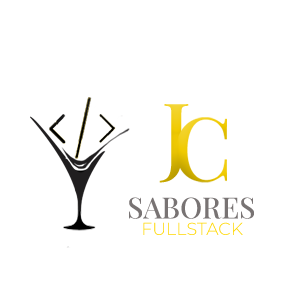
<style>
.page{position:relative;width:300px;height:300px;background:#ffffff}
.page>*{position:absolute;margin:0}
.t1{font:29.2px "PlayfairDisplay-Medium";color:#787373}
.t2{font:17.5px "Montserrat-Light"}
</style>
<div class="page">
<p class="t1" style="left:129px;top:197px;width:125px;height:22px">SABORES</p>
<p class="t2" style="left:143px;top:222px;width:100px;height:13px">FULLSTACK</p>
</div>
